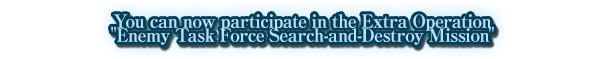
<style>
.page{position:relative;width:606px;height:59px;background:#ffffff}
.page>*{position:absolute;margin:0}
.t1{font:18px/14px "RyuminPro-ExBold";letter-spacing:-0.04em;color:#b9e0ff}
</style>
<div class="page">
<p class="t1" style="left:111px;top:14px;width:383px;height:31px;text-align:center">You can now participate in the Extra Operation<br>"Enemy Task Force Search-and-Destroy Mission"</p>
</div>
